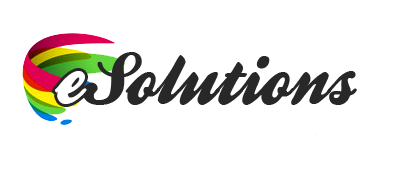
<style>
.page{position:relative;width:400px;height:184px;background:#ffffff}
.page>*{position:absolute;margin:0}
.t1{font:75px "BallparkWeiner";color:#292829}
.t2{font:75px "BallparkWeiner";color:#ffffff}
</style>
<div class="page">
<p class="t1" style="left:83px;top:52px;width:274px;height:53px">Solutions</p>
<p class="t2" style="left:55px;top:71px;width:32px;height:33px">e</p>
</div>
